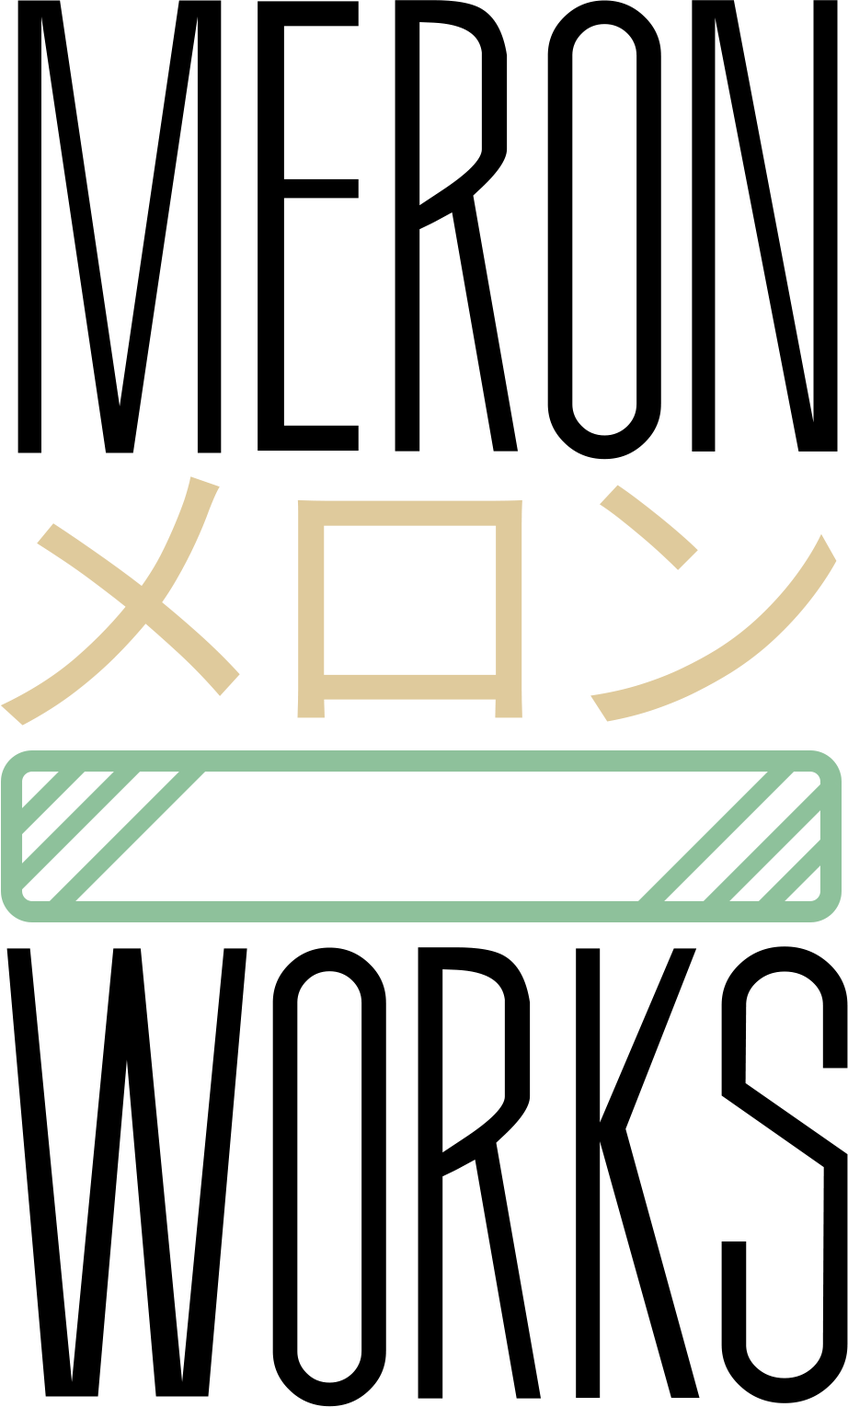
<style>
.page{position:relative;width:848px;height:1407px;background:#ffffff}
.page>*{position:absolute;margin:0}
.t1{font:574.6px "ThinDesign";color:#000000}
.t2{font:314.1px "NotoSansJP-Regular";color:#dfca9c}
</style>
<div class="page">
<p class="t1" style="left:17px;top:0px;width:821px;height:460px">MERON</p>
<p class="t2" style="left:0px;top:476px;width:837px;height:249px">メロン</p>
<p class="t1" style="left:6px;top:946px;width:842px;height:461px">WORKS</p>
</div>
